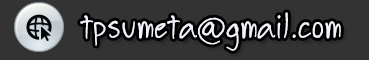
<style>
.page{position:relative;width:369px;height:60px;background:#333333}
.page>*{position:absolute;margin:0}
.t1{font:48px "1.05_tushand";color:#f3f2fb}
</style>
<div class="page">
<p class="t1" style="left:80px;top:12px;width:261px;height:39px">tpsumeta@gmail.com</p>
</div>
